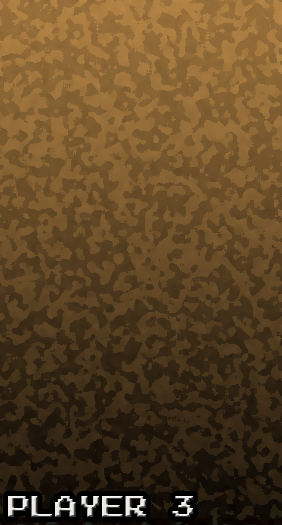
<style>
.page{position:relative;width:282px;height:525px}
.page>*{position:absolute;margin:0}
.t1{font:24px "ArcadeNormal"}
</style>
<div class="page">
<p class="t1" style="left:8px;top:496px;width:186px;height:21px">Player 3</p>
</div>
